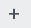
<style>
.page{position:relative;width:31px;height:28px;background:#ebedee}
.page>*{position:absolute;margin:0}
.t1{font:19.8px "MyriadPro-Bold";color:#4c5160}
</style>
<div class="page">
<p class="t1" style="left:9px;top:8px;width:10px;height:11px">+</p>
</div>
